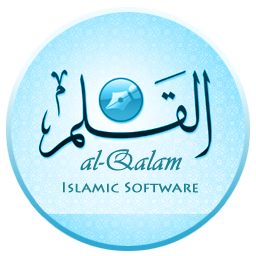
<style>
.page{position:relative;width:256px;height:256px;background:#ffffff}
.page>*{position:absolute;margin:0}
.t1{font:30px "Vivaldii";color:#1d8095;font-weight:bold}
.t2{font:14px "LithosPro-Regular";color:#1d8095;font-weight:bold}
</style>
<div class="page">
<p class="t1" style="left:80px;top:149px;width:102px;height:22px">al-Qalam</p>
<p class="t2" style="left:63px;top:182px;width:135px;height:11px">Islamic Software</p>
</div>
